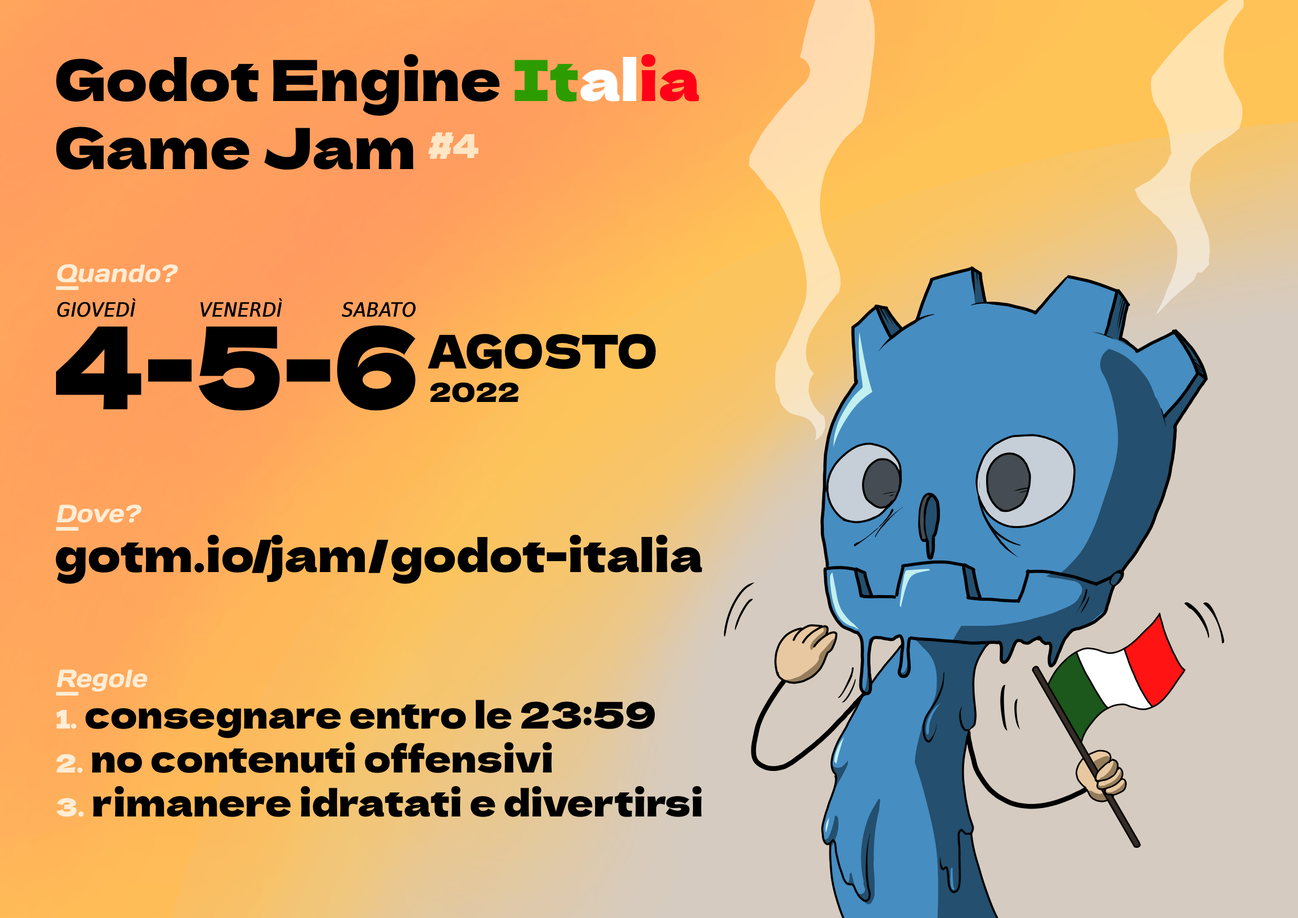
<style>
.page{position:relative;width:1298px;height:918px}
.page>*{position:absolute;margin:0}
.t1{font:56.5px "DelaGothicOne-Regular";color:#000000}
.t2{font:56.5px "DelaGothicOne-Regular";color:#2d9c02}
.t3{font:56.5px "DelaGothicOne-Regular";color:#ffffff}
.t4{font:56.5px "DelaGothicOne-Regular";color:#ff0018}
.t5{font:56.5px "DelaGothicOne-Regular";letter-spacing:-0.046em;color:#ffe6c5;scale:0.9 1}
.t6{font:25.1px "Days";color:#ffedd5;font-style:italic}
.t7{font:19.8px "DejaVuSansCondensed-Oblique";color:#000000;font-weight:bold}
.t8{font:114px "DelaGothicOne-Regular";color:#000000;scale:0.88 1}
.t9{font:46.2px "DelaGothicOne-Regular";color:#000000;scale:0.9 1}
.t10{font:26.4px "DelaGothicOne-Regular";color:#000000}
.t11{font:45px "DelaGothicOne-Regular";color:#000000}
.t12{font:36.7px "DelaGothicOne-Regular";color:#000000}
.t13{font:25.1px "DelaGothicOne-Regular";color:#ffedd5}
</style>
<div class="page">
<p class="t1" style="left:56px;top:54px;width:643px;height:116px">Godot Engine <span class="t2">It</span><span class="t3">al</span><span class="t4">ia <br></span>Game Jam <span class="t5">#4</span></p>
<p class="t6" style="left:57px;top:264px;width:121px;height:19px">Quando?</p>
<p class="t7" style="left:57px;top:298px;width:359px;height:19px">GIOVEDÌ   VENERDÌ   SABATO</p>
<p class="t8" style="left:56px;top:325px;width:360px;height:86px">4-5-6</p>
<p class="t9" style="left:428px;top:334px;width:228px;height:35px">AGOSTO</p>
<p class="t10" style="left:430px;top:382px;width:89px;height:21px">2022</p>
<p class="t6" style="left:57px;top:505px;width:84px;height:18px">Dove?</p>
<p class="t11" style="left:55px;top:535px;width:648px;height:49px">gotm.io/jam/godot-italia</p>
<p class="t6" style="left:57px;top:670px;width:91px;height:22px">Regole</p>
<p class="t12" style="left:57px;top:700px;width:645px;height:117px"><span class="t13">1. </span>consegnare entro le 23:59<br> <span class="t13">2. </span>no contenuti offensivi<br> <span class="t13">3. </span>rimanere idratati e divertirsi</p>
</div>
